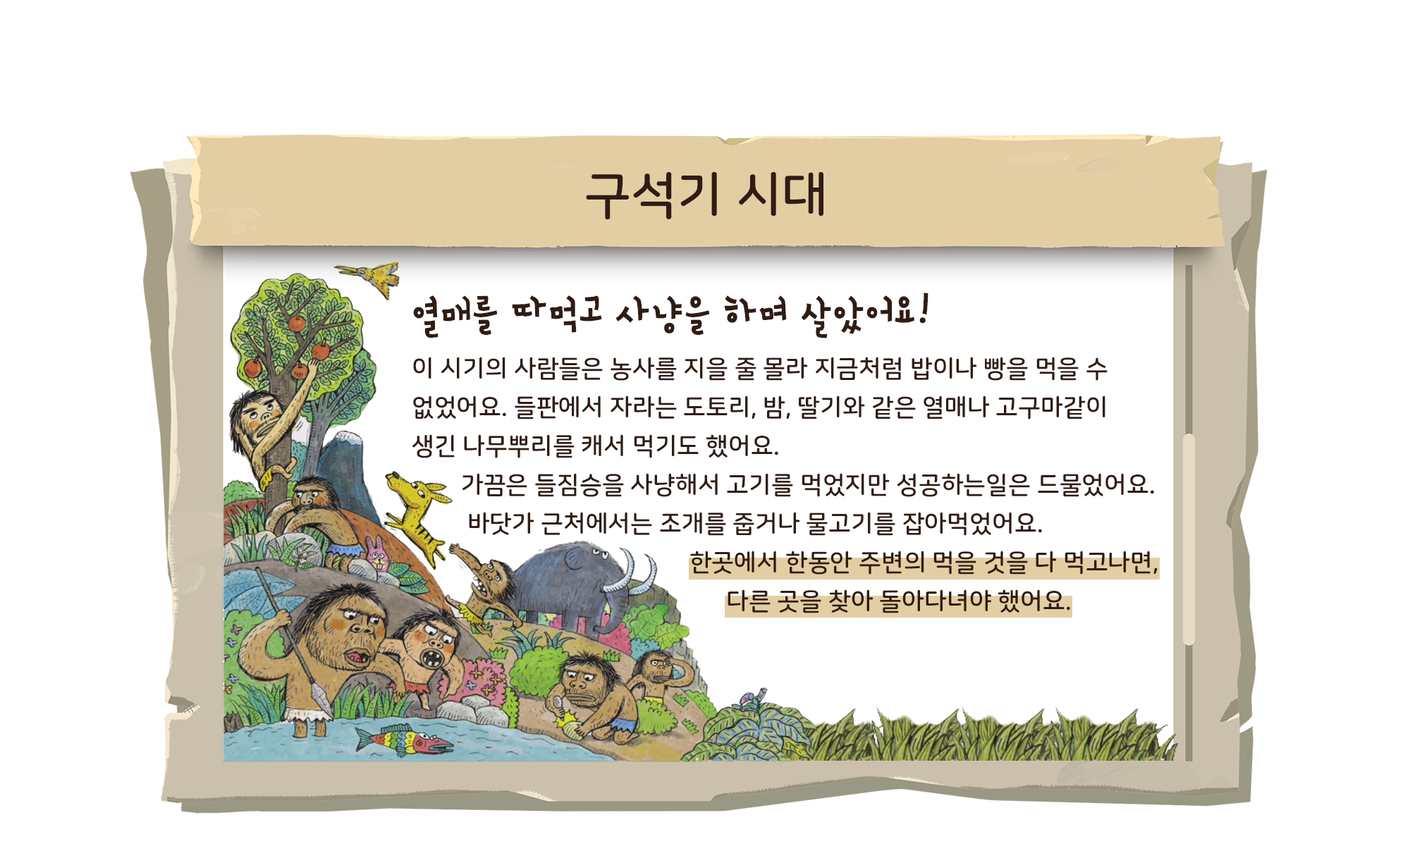
<style>
.page{position:relative;width:1410px;height:846px;background:#ffffff}
.page>*{position:absolute;margin:0}
.t1{font:50.8px "NanumSquareRoundOTFB";color:#301c13}
.t2{font:24.7px/38.8px "NanumSquareRoundOTFB";color:#301c13}
.t3{font:50.8px/64.8px "SDdBYeonpil-cBd";color:#301c13}
</style>
<div class="page">
<p class="t1" style="left:586px;top:172px;width:237px;height:48px">구석기 시대</p>
<p class="t2" style="left:412px;top:293px;width:745px;height:320px"><span class="t3">열매를 따먹고 사냥을 하며 살았어요!<br></span>이 시기의 사람들은 농사를 지을 줄 몰라 지금처럼 밥이나 빵을 먹을 수<br>없었어요. 들판에서 자라는 도토리, 밤, 딸기와 같은 열매나 고구마같이 <br>생긴 나무뿌리를 캐서 먹기도 했어요. <br>        가끔은 들짐승을 사냥해서 고기를 먹었지만 성공하는일은 드물었어요. <br>         바닷가 근처에서는 조개를 줍거나 물고기를 잡아먹었어요.<br>                                             한곳에서 한동안 주변의 먹을 것을 다 먹고나면, <br>                                                   다른 곳을 찾아 돌아다녀야 했어요.</p>
</div>
